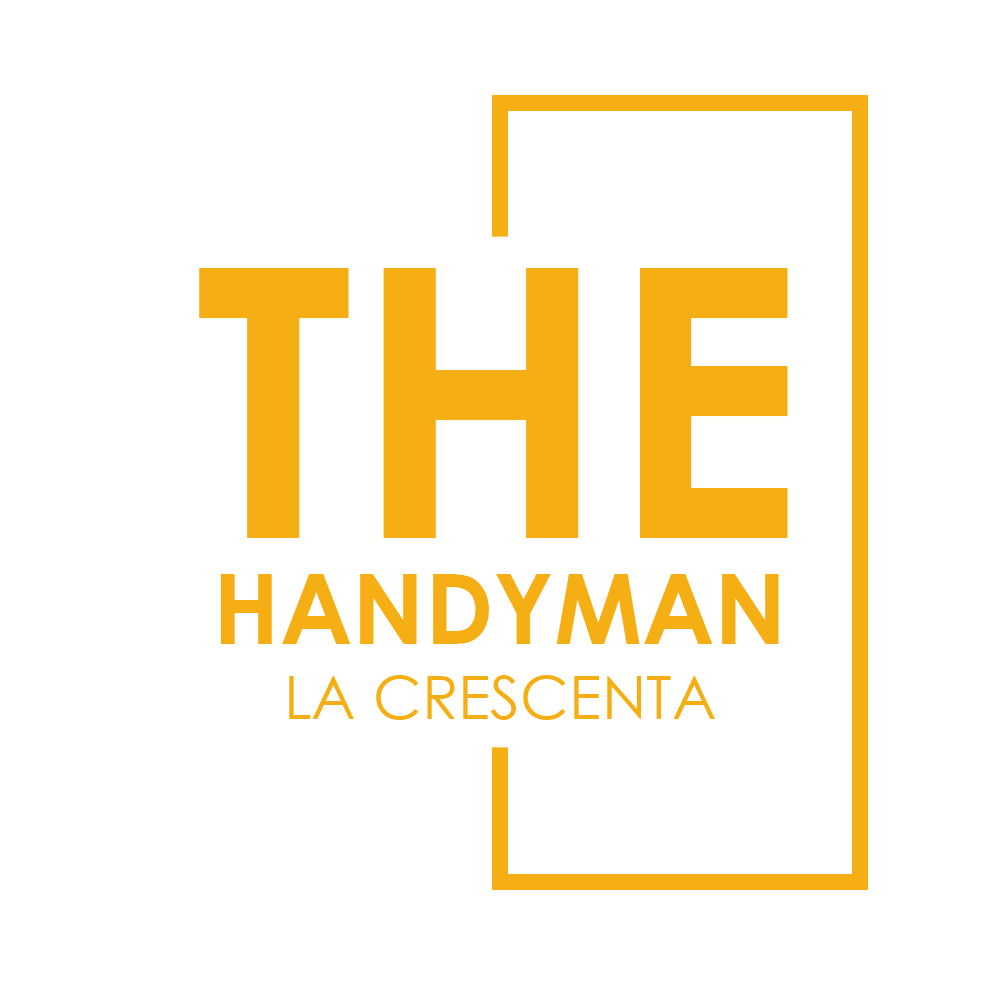
<style>
.page{position:relative;width:1000px;height:984px;background:#ffffff}
.page>*{position:absolute;margin:0}
.t1{font:60.2px/75.3px "CenturyGothic";color:#f5af14;text-transform:uppercase}
.t2{font:376.4px/135.5px "CenturyGothic-Bold";color:#f5af14;text-transform:uppercase}
.t3{font:97.9px/105.4px "CenturyGothic-Bold";color:#f5af14;text-transform:uppercase}
</style>
<div class="page">
<p class="t1" style="left:199px;top:268px;width:589px;height:452px;text-align:center"><span class="t2">THE <br></span><span class="t3">HANDYMAN<br></span>LA CRESCENTA</p>
</div>
